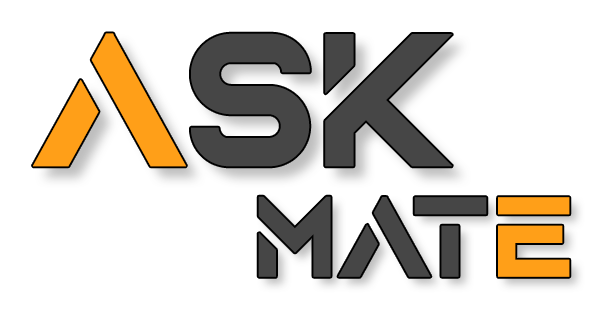
<style>
.page{position:relative;width:600px;height:320px;background:#ffffff}
.page>*{position:absolute;margin:0}
.t1{font:200px "AquireBold";color:#464646}
.t2{font:200px "AquireBold";color:#ff9f18}
.t3{font:120px "AquireBold";color:#464646}
.t4{font:40px "Arial-Black";color:#0078a5}
.t5{font:120px "AquireBold";color:#ff9f18}
</style>
<div class="page">
<p class="t1" style="left:33px;top:33px;width:419px;height:134px"><span class="t2">A</span>SK</p>
<p class="t3" style="left:258px;top:196px;width:312px;height:81px"><span class="t4"> <br></span>MAT<span class="t5">E</span></p>
</div>
